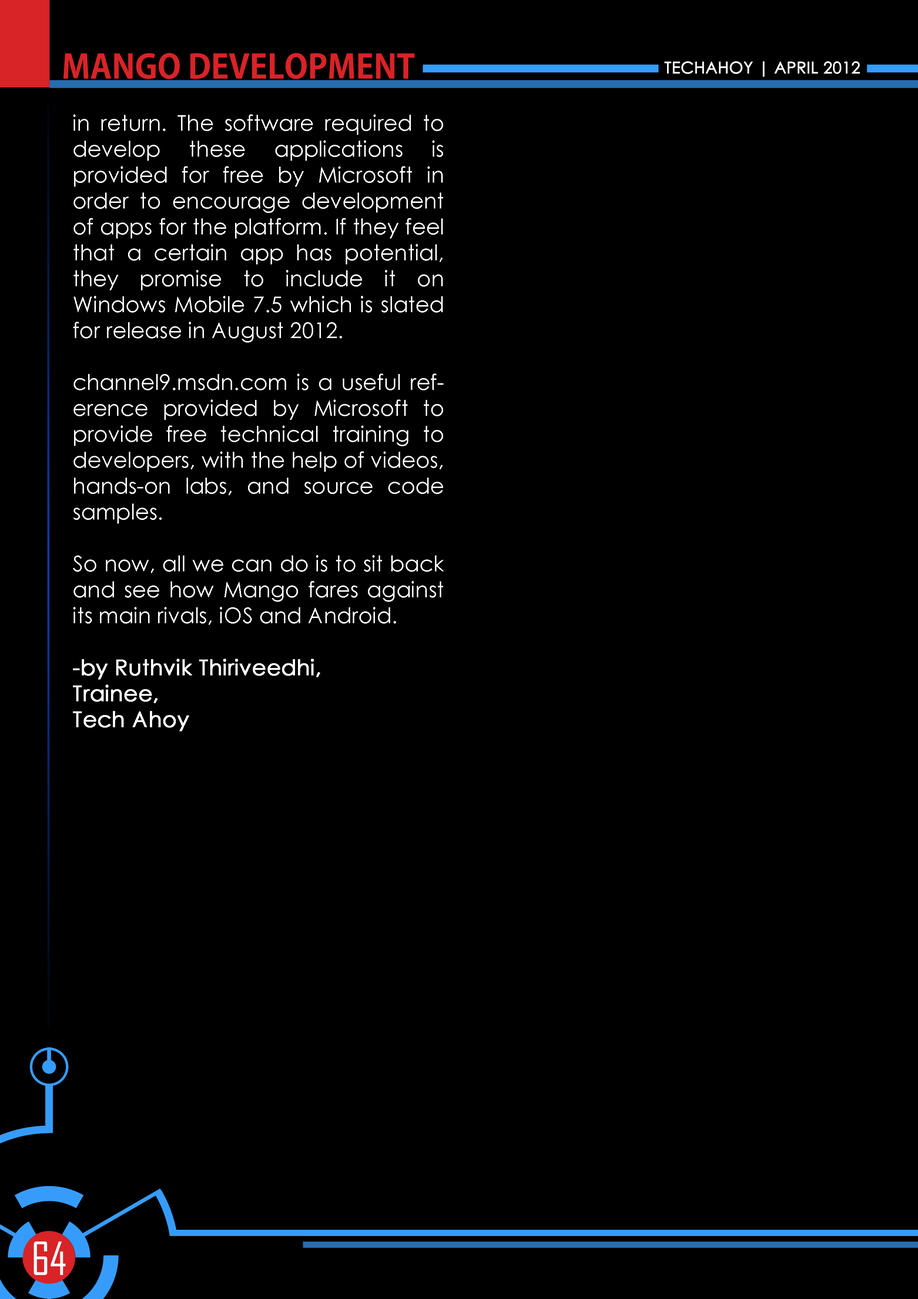
<style>
.page{position:relative;width:918px;height:1299px;background:#000000}
.page>*{position:absolute;margin:0}
.t1{font:32.6px "AdobeGothicStd-Bold";color:#d82327;text-transform:uppercase}
.t2{font:16px "CenturyGothic";color:#ffffff;text-transform:uppercase;font-weight:bold}
.t3{font:21.6px "CenturyGothic";color:#ffffff}
.t4{font:21.6px "CenturyGothic";color:#ffffff;font-weight:bold}
.t5{font:43.7px "AgencyFB-Reg";color:#ffffff;text-transform:uppercase}
</style>
<div class="page">
<p class="t1" style="left:63px;top:53px;width:352px;height:26px">MAngo Development</p>
<p class="t2" style="left:665px;top:61px;width:195px;height:16px">techahoy | APRIL 2012</p>
<p class="t3" style="left:73px;top:114px;width:371px;height:617px;text-align:justify">in return. The software required to develop these applications is provided for free by Microsoft in order to encourage development of apps for the platform. If they feel that a certain app has potential, they promise to include it on Windows Mobile 7.5 which is slated for release in August 2012.<br><br>channel9.msdn.com is a useful reference provided by Microsoft to provide free technical training to developers, with the help of videos, hands-on labs, and source code samples.<br><br>So now, all we can do is to sit back and see how Mango fares against its main rivals, iOS and Android.<br><br><span class="t4">-by Ruthvik Thiriveedhi,<br>Trainee,<br>Tech Ahoy</span></p>
<p class="t5" style="left:34px;top:1241px;width:32px;height:34px">64</p>
</div>
